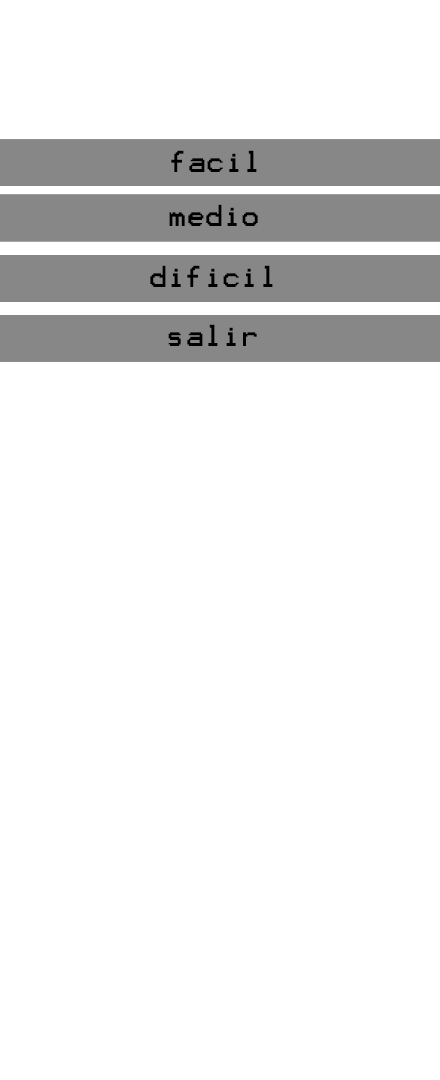
<style>
.page{position:relative;width:440px;height:1080px;background:#ffffff}
.page>*{position:absolute;margin:0}
.t1{font:24.3px "Terminal";color:#000000}
</style>
<div class="page">
<p class="t1" style="left:171px;top:150px;width:86px;height:22px">facil</p>
<p class="t1" style="left:169px;top:204px;width:89px;height:22px">medio</p>
<p class="t1" style="left:150px;top:265px;width:123px;height:22px">dificil</p>
<p class="t1" style="left:168px;top:324px;width:89px;height:22px">salir</p>
</div>
